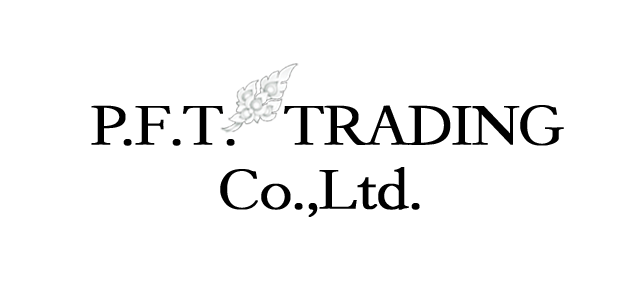
<style>
.page{position:relative;width:633px;height:293px;background:#ffffff}
.page>*{position:absolute;margin:0}
.t1{font:60px/64.2px "Garogier";letter-spacing:-0.025em;color:#000000;font-weight:bold;scale:1.05 1}
.t2{font:72px/60.2px "Garogier";letter-spacing:-0.025em;color:#000000;font-weight:bold;scale:0.78 1}
</style>
<div class="page">
<p class="t1" style="left:91px;top:105px;width:473px;height:112px;text-align:center"><span class="t2">  </span>P.F.T.   TRADING <br>Co.,Ltd.</p>
</div>
